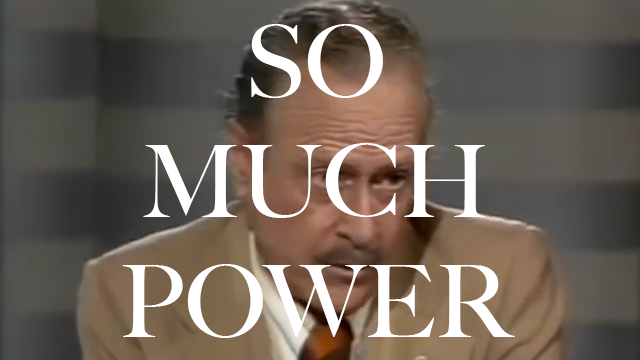
<style>
.page{position:relative;width:640px;height:360px}
.page>*{position:absolute;margin:0}
.t1{font:100px "BigCaslon-Medium";letter-spacing:-0.002em;color:#ffffff}
</style>
<div class="page">
<p class="t1" style="left:122px;top:24px;width:393px;height:314px;text-align:center">SO<br>MUCH<br>POWER</p>
</div>
